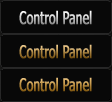
<style>
.page{position:relative;width:112px;height:102px;background:#080808}
.page>*{position:absolute;margin:0}
.t1{font:17.4px "Tahoma";font-weight:bold;scale:0.68 1}
</style>
<div class="page">
<p class="t1" style="left:19px;top:10px;width:73px;height:15px">Control Panel</p>
<p class="t1" style="left:19px;top:44px;width:73px;height:15px">Control Panel</p>
<p class="t1" style="left:19px;top:77px;width:73px;height:15px">Control Panel</p>
</div>
